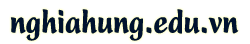
<style>
.page{position:relative;width:250px;height:44px;background:#ffffff}
.page>*{position:absolute;margin:0}
.t1{font:36px "UVNBayBuomHepNang";color:#00122e}
</style>
<div class="page">
<p class="t1" style="left:10px;top:9px;width:229px;height:32px">nghiahung.edu.vn</p>
</div>
